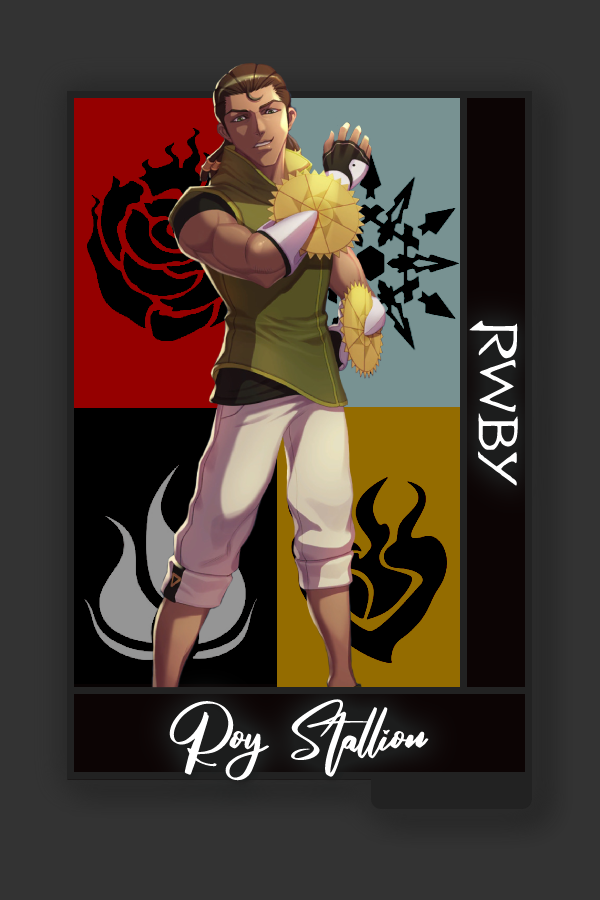
<style>
.page{position:relative;width:600px;height:900px;background:#333333}
.page>*{position:absolute;margin:0}
.t1{font:61.3px "RWBY_Style";color:#ffffff;scale:1.25 1}
.t2{font:76.6px "RosegaFREE";color:#ffffff;scale:0.91 1}
</style>
<div class="page">
<p class="t1" style="left:469px;top:320px;width:49px;height:166px;rotate:90deg">RWBY</p>
<p class="t2" style="left:168px;top:684px;width:261px;height:102px">Roy Stallion</p>
</div>
